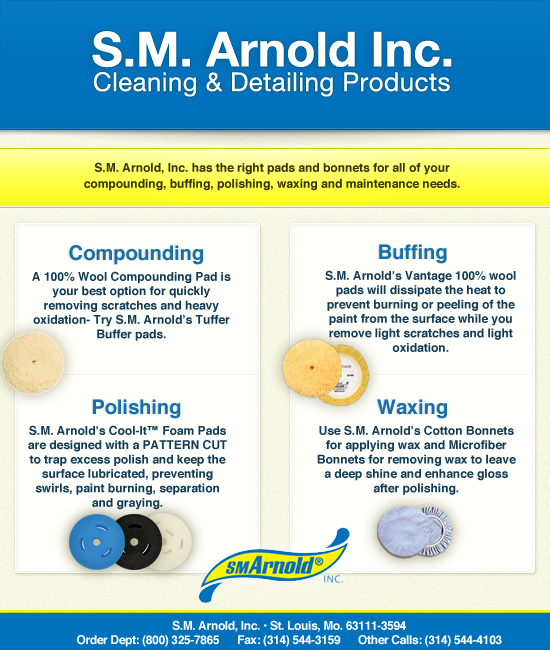
<style>
.page{position:relative;width:550px;height:650px;background:#fffffb}
.page>*{position:absolute;margin:0}
.t1{font:48px "HelveticaNeue-Bold";color:#ffffff}
.t2{font:26px "HelveticaNeue";letter-spacing:0.015em;color:#ffffff}
.t3{font:12px/16px "Helvetica-Bold";color:#363300}
.t4{font:20px "Helvetica-Bold";color:#1370ab}
.t5{font:12px "Helvetica-Bold";color:#123c57}
.t6{font:12px "Helvetica-Bold";color:#113c57}
.t7{font:12px "Helvetica-Bold";letter-spacing:-0.03em;color:#ffffff}
</style>
<div class="page">
<p class="t1" style="left:92px;top:31px;width:360px;height:37px">S.M. Arnold Inc.</p>
<p class="t2" style="left:93px;top:72px;width:357px;height:25px">Cleaning &amp; Detailing Products</p>
<p class="t3" style="left:84px;top:162px;width:376px;height:29px;text-align:center">S.M. Arnold, Inc. has the right pads and bonnets for all of your compounding, buffing, polishing, waxing and maintenance needs.</p>
<p class="t4" style="left:69px;top:245px;width:134px;height:20px">Compounding</p>
<p class="t4" style="left:379px;top:244px;width:68px;height:20px">Buffing</p>
<p class="t5" style="left:325px;top:270px;width:191px;height:82px;text-align:center">S.M. Arnold’s Vantage 100% wool pads will dissipate the heat to prevent burning or peeling of the paint from the surface while you remove light scratches and light oxidation.</p>
<p class="t6" style="left:32px;top:271px;width:199px;height:70px;text-align:center">A 100% Wool Compounding Pad is your best option for quickly removing scratches and heavy oxidation- Try S.M. Arnold’s Tuffer Buffer pads.</p>
<p class="t4" style="left:93px;top:399px;width:88px;height:20px">Polishing</p>
<p class="t4" style="left:377px;top:399px;width:70px;height:20px">Waxing</p>
<p class="t6" style="left:28px;top:425px;width:199px;height:85px;text-align:center">S.M. Arnold’s Cool-It™ Foam Pads are designed with a PATTERN CUT to trap excess polish and keep the surface lubricated, preventing swirls, paint burning, separation and graying.</p>
<p class="t6" style="left:317px;top:425px;width:199px;height:70px;text-align:center">Use S.M. Arnold’s Cotton Bonnets for applying wax and Microfiber Bonnets for removing wax to leave a deep shine and enhance gloss after polishing.</p>
<p class="t7" style="left:77px;top:620px;width:425px;height:27px;text-align:center">S.M. Arnold, Inc. • St. Louis, Mo. 63111-3594<br>Order Dept: (800) 325-7865      Fax: (314) 544-3159      Other Calls: (314) 544-4103</p>
</div>
